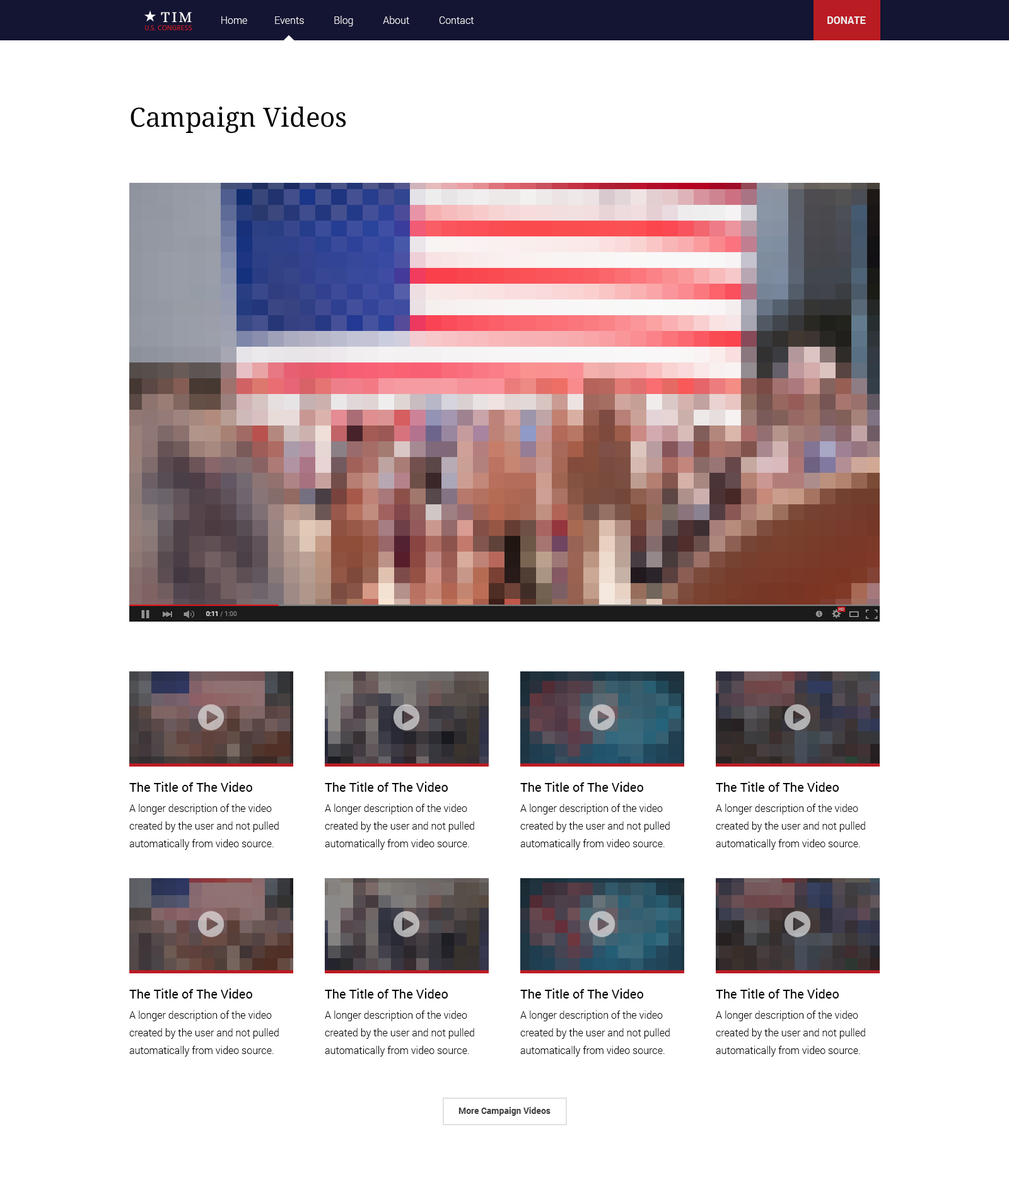
<style>
.page{position:relative;width:1009px;height:1182px;background:#ffffff}
.page>*{position:absolute;margin:0}
.t1{font:15.6px "Alice-Regular";letter-spacing:0.1em;color:#ffffff;text-transform:uppercase}
.t2{font:10.1px "Roboto-Light";color:#ededef}
.t3{font:10.1px "Roboto-Bold";color:#ededef}
.t4{font:6.9px "Hind-Regular";letter-spacing:0.03em;color:#ba1c24;text-transform:uppercase}
.t5{font:26.5px "DroidSerif";color:#000000}
.t6{font:12.6px "Roboto-Regular";color:#000000}
.t7{font:10.1px/17.7px "Roboto-Light";color:#000000}
.t8{font:8.8px "Roboto-Bold";color:#403d3d}
</style>
<div class="page">
<p class="t1" style="left:161px;top:12px;width:31px;height:11px">Tim</p>
<p class="t2" style="left:221px;top:16px;width:253px;height:10px">Home           Events            Blog            About            Contact</p>
<p class="t3" style="left:827px;top:16px;width:39px;height:8px">DONATE</p>
<p class="t4" style="left:145px;top:25px;width:47px;height:5px">U.S. Congress</p>
<p class="t5" style="left:131px;top:107px;width:215px;height:26px">Campaign Videos</p>
<p class="t6" style="left:129px;top:782px;width:123px;height:10px">The Title of The Video</p>
<p class="t6" style="left:325px;top:782px;width:123px;height:10px">The Title of The Video</p>
<p class="t6" style="left:520px;top:782px;width:123px;height:10px">The Title of The Video</p>
<p class="t6" style="left:716px;top:782px;width:123px;height:10px">The Title of The Video</p>
<p class="t7" style="left:129px;top:804px;width:150px;height:46px">A longer description of the video created by the user and not pulled automatically from video source.</p>
<p class="t7" style="left:325px;top:804px;width:149px;height:46px">A longer description of the video created by the user and not pulled automatically from video source.</p>
<p class="t7" style="left:520px;top:804px;width:150px;height:46px">A longer description of the video created by the user and not pulled automatically from video source.</p>
<p class="t7" style="left:716px;top:804px;width:149px;height:46px">A longer description of the video created by the user and not pulled automatically from video source.</p>
<p class="t6" style="left:129px;top:989px;width:123px;height:10px">The Title of The Video</p>
<p class="t6" style="left:325px;top:989px;width:123px;height:10px">The Title of The Video</p>
<p class="t6" style="left:520px;top:989px;width:123px;height:10px">The Title of The Video</p>
<p class="t6" style="left:716px;top:989px;width:123px;height:10px">The Title of The Video</p>
<p class="t7" style="left:129px;top:1011px;width:150px;height:46px">A longer description of the video created by the user and not pulled automatically from video source.</p>
<p class="t7" style="left:325px;top:1011px;width:149px;height:46px">A longer description of the video created by the user and not pulled automatically from video source.</p>
<p class="t7" style="left:520px;top:1011px;width:150px;height:46px">A longer description of the video created by the user and not pulled automatically from video source.</p>
<p class="t7" style="left:716px;top:1011px;width:149px;height:46px">A longer description of the video created by the user and not pulled automatically from video source.</p>
<p class="t8" style="left:458px;top:1107px;width:92px;height:9px">More Campaign Videos</p>
</div>
